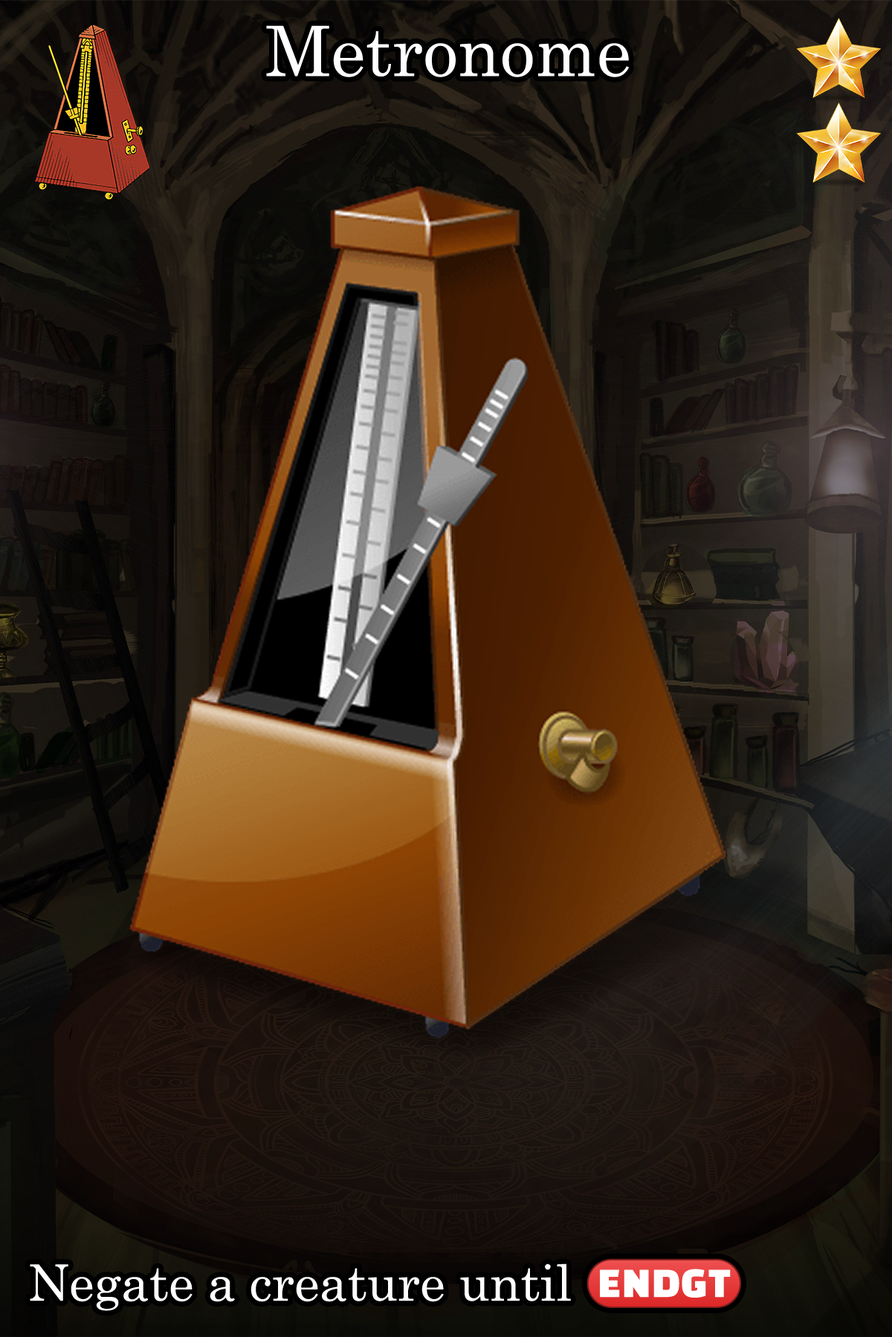
<style>
.page{position:relative;width:892px;height:1337px}
.page>*{position:absolute;margin:0}
.t1{font:118.9px "Century";color:#ffffff}
.t2{font:86.2px "Century"}
.t3{font:86.2px "stoogedings-Regular"}
</style>
<div class="page">
<p class="t1" style="left:266px;top:25px;width:363px;height:52px">Metronome</p>
<p class="t2" style="left:30px;top:1259px;width:711px;height:52px">Negate a creature until <span class="t3">(ENDGT)</span></p>
</div>
